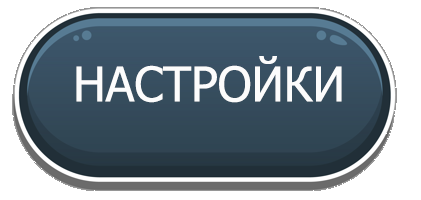
<style>
.page{position:relative;width:421px;height:200px;background:#ffffff}
.page>*{position:absolute;margin:0}
.t1{font:48px "Tahoma";color:#fcfcfc}
</style>
<div class="page">
<p class="t1" style="left:76px;top:56px;width:266px;height:47px">НАСТРОЙКИ</p>
</div>
